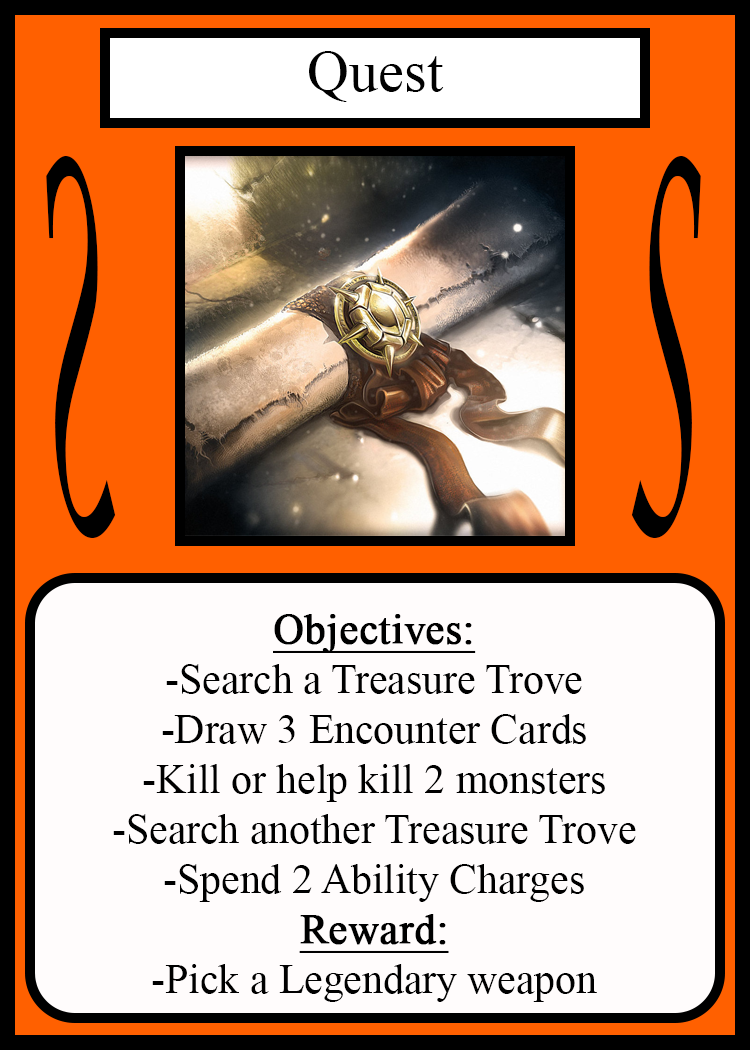
<style>
.page{position:relative;width:750px;height:1050px;background:#fffcfc}
.page>*{position:absolute;margin:0}
.t1{font:58.3px "TimesNewRomanPSMT";color:#010101}
.t2{font:504.3px "LucidaCalligraphy-Italic";color:#000000;scale:0.24 1}
.t3{font:504.1px "LucidaCalligraphy-Italic";color:#000000;scale:0.24 1}
.t4{font:41.7px "TimesNewRomanPSMT";color:#000000}
.t5{font:41.7px "TimesNewRomanPSMT";color:#000000;font-weight:bold;text-decoration:underline}
</style>
<div class="page">
<p class="t1" style="left:309px;top:51px;width:135px;height:51px">Quest</p>
<p class="t2" style="left:46px;top:156px;width:70px;height:382px;rotate:180deg">S</p>
<p class="t3" style="left:631px;top:156px;width:70px;height:382px">S</p>
<p class="t4" style="left:113px;top:614px;width:523px;height:388px;text-align:center"><span class="t5">Objectives:<br></span>-Search a Treasure Trove<br>-Draw 3 Encounter Cards<br>-Kill or help kill 2 monsters<br>-Search another Treasure Trove<br>-Spend 2 Ability Charges<br><span class="t5">Reward:</span><br>-Pick a Legendary weapon</p>
</div>
